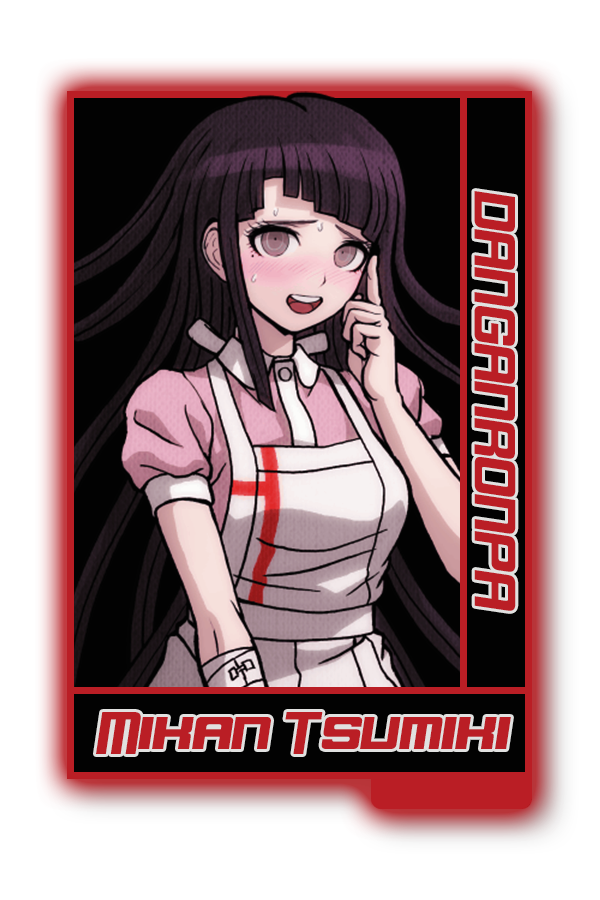
<style>
.page{position:relative;width:600px;height:900px;background:#ffffff}
.page>*{position:absolute;margin:0}
.t1{font:48.8px "DorBlue";color:#bb2c2e}
.t2{font:50.5px "DorBlue";color:#bb2c2e}
</style>
<div class="page">
<p class="t1" style="left:474px;top:191px;width:42px;height:420px;rotate:90deg">DANGANRONPA</p>
<p class="t2" style="left:96px;top:712px;width:415px;height:42px">Mikan Tsumiki</p>
</div>
